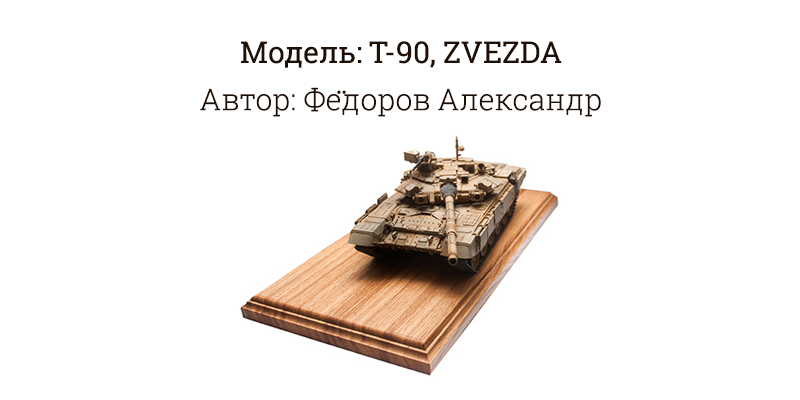
<style>
.page{position:relative;width:800px;height:400px;background:#ffffff}
.page>*{position:absolute;margin:0}
.t1{font:30px/40px "RobotoSlab-Regular";color:#1f0f05}
.t2{font:30px/40px "RobotoSlab-Light";color:#1f0f05}
.t3{font:30px/40px "TimesNewRomanPSMT";color:#1f0f05}
</style>
<div class="page">
<p class="t1" style="left:200px;top:41px;width:401px;height:76px;text-align:center">Модель: Т-90, ZVEZDA<br><span class="t2">Автор: Фе</span><span class="t3">̈</span><span class="t2">доров Александр</span></p>
</div>
